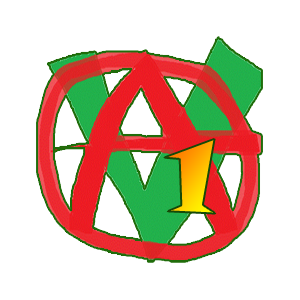
<style>
.page{position:relative;width:300px;height:300px;background:#ffffff}
.page>*{position:absolute;margin:0}
.t1{font:100px "SnapITC-Regular";letter-spacing:-0.015em}
</style>
<div class="page">
<p class="t1" style="left:164px;top:139px;width:52px;height:75px">1</p>
</div>
